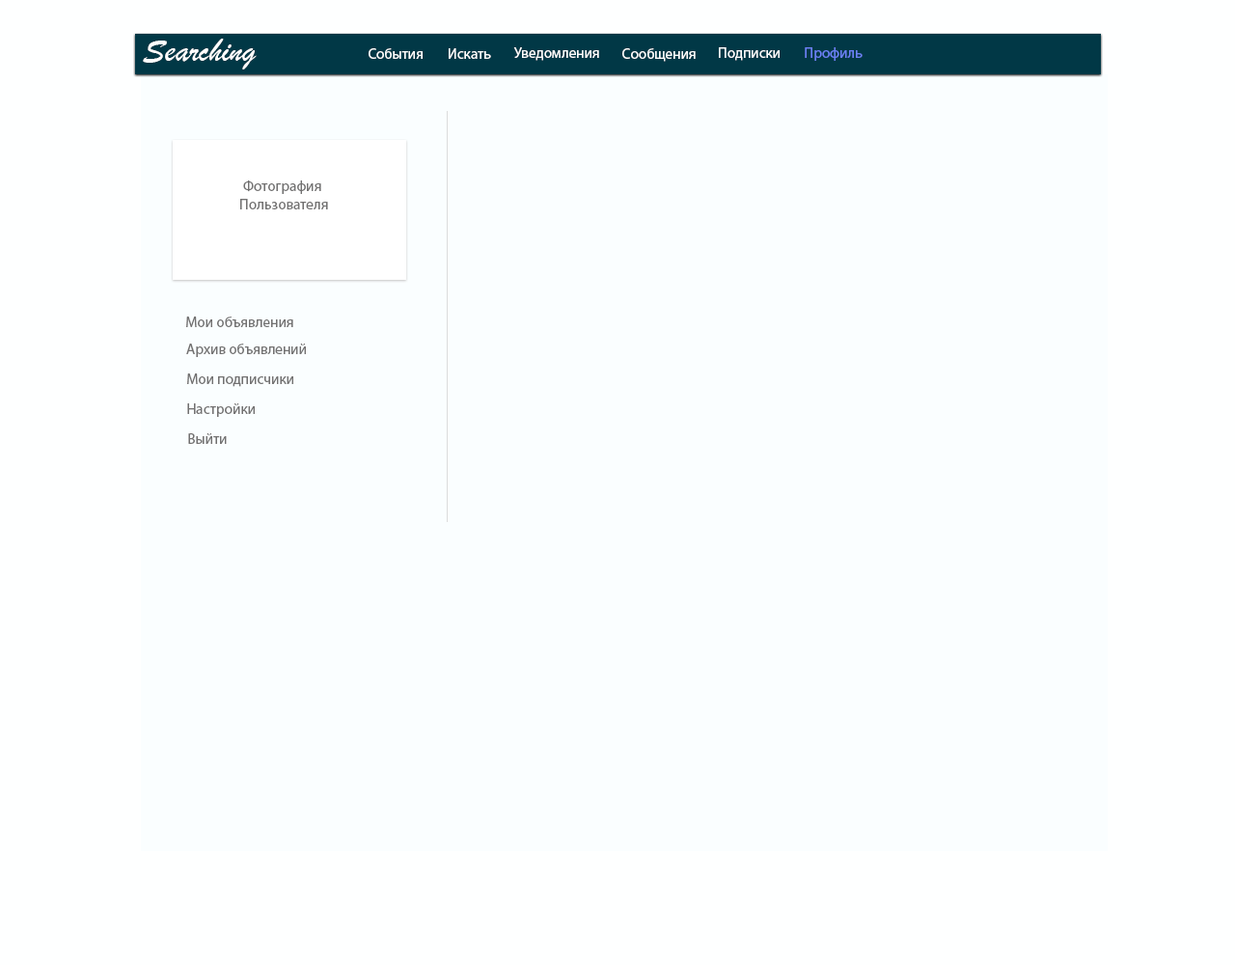
<style>
.page{position:relative;width:1235px;height:965px;background:#fafeff}
.page>*{position:absolute;margin:0}
.t1{font:34.3px "BrushScriptMT";color:#ffffff}
.t2{font:14.7px "MyriadPro-Regular";color:#ffffff}
.t3{font:14.7px "MyriadPro-Regular";color:#6a81f6}
.t4{font:14.7px "MyriadPro-Regular";color:#727171}
</style>
<div class="page">
<p class="t1" style="left:143px;top:39px;width:114px;height:30px">Searching</p>
<p class="t2" style="left:369px;top:48px;width:54px;height:11px">События</p>
<p class="t2" style="left:449px;top:48px;width:42px;height:11px">Искать</p>
<p class="t2" style="left:513px;top:47px;width:86px;height:14px">Уведомления</p>
<p class="t2" style="left:623px;top:48px;width:73px;height:14px">Сообщения</p>
<p class="t2" style="left:719px;top:47px;width:61px;height:14px">Подписки</p>
<p class="t3" style="left:805px;top:47px;width:58px;height:14px">Профиль</p>
<p class="t4" style="left:240px;top:180px;width:88px;height:29px;text-align:center">Фотография <br>Пользователя</p>
<p class="t4" style="left:186px;top:317px;width:107px;height:10px">Мои объявления</p>
<p class="t4" style="left:186px;top:344px;width:120px;height:13px">Архив объявлений</p>
<p class="t4" style="left:187px;top:374px;width:106px;height:13px">Мои подписчики</p>
<p class="t4" style="left:187px;top:403px;width:68px;height:14px">Настройки</p>
<p class="t4" style="left:188px;top:433px;width:39px;height:11px">Выйти</p>
</div>
